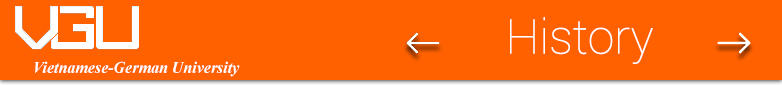
<style>
.page{position:relative;width:782px;height:85px;background:#ff6100}
.page>*{position:absolute;margin:0}
.t1{font:48px "Roboto-Thin";color:#ffffff}
.t2{font:16px "TimesNewRomanPS-BoldItalicMT";color:#ffffff}
</style>
<div class="page">
<p class="t1" style="left:510px;top:17px;width:143px;height:47px">History</p>
<p class="t2" style="left:34px;top:61px;width:206px;height:16px">Vietnamese-German University</p>
</div>
